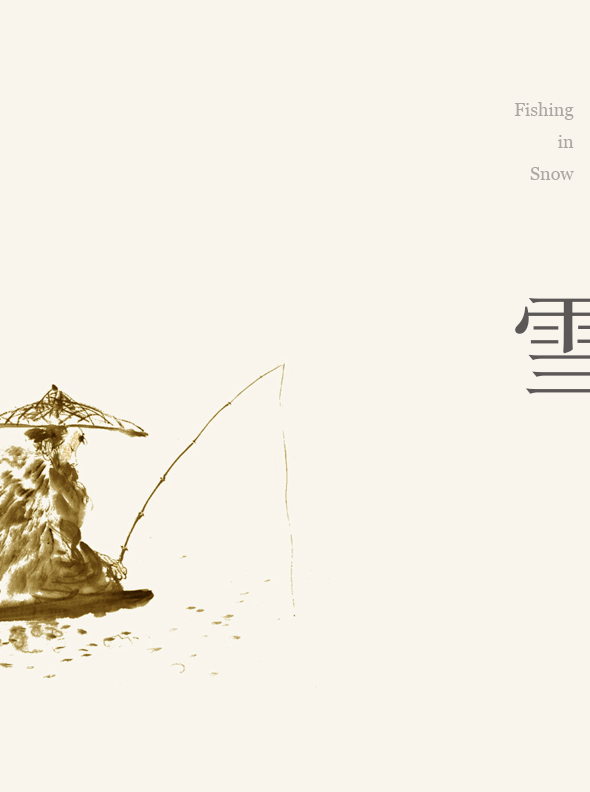
<style>
.page{position:relative;width:590px;height:792px;background:#f9f5ed}
.page>*{position:absolute;margin:0}
.t1{font:18px/32px "Georgia";color:#aba7a3}
</style>
<div class="page">
<p class="t1" style="left:514px;top:102px;width:60px;height:78px;text-align:right">Fishing <br>in <br>Snow</p>
</div>
